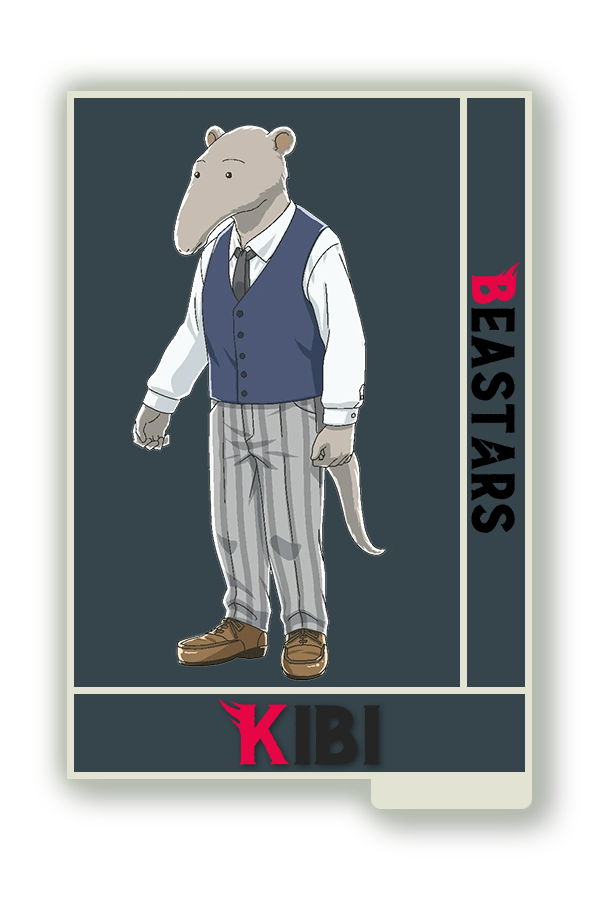
<style>
.page{position:relative;width:600px;height:900px;background:#36454b}
.page>*{position:absolute;margin:0}
.t1{font:48.8px "BEAST";color:#000000}
.t2{font:48.8px "BEAST";color:#e60646}
.t3{font:67px "BEAST";color:#252525;scale:1.12 1}
.t4{font:67px "BEAST";color:#e60646;scale:1.12 1}
</style>
<div class="page">
<p class="t1" style="left:471px;top:262px;width:50px;height:271px;rotate:90deg"><span class="t2">B</span>east@rs</p>
<p class="t3" style="left:219px;top:698px;width:161px;height:67px"><span class="t4">K</span>ibi</p>
</div>
